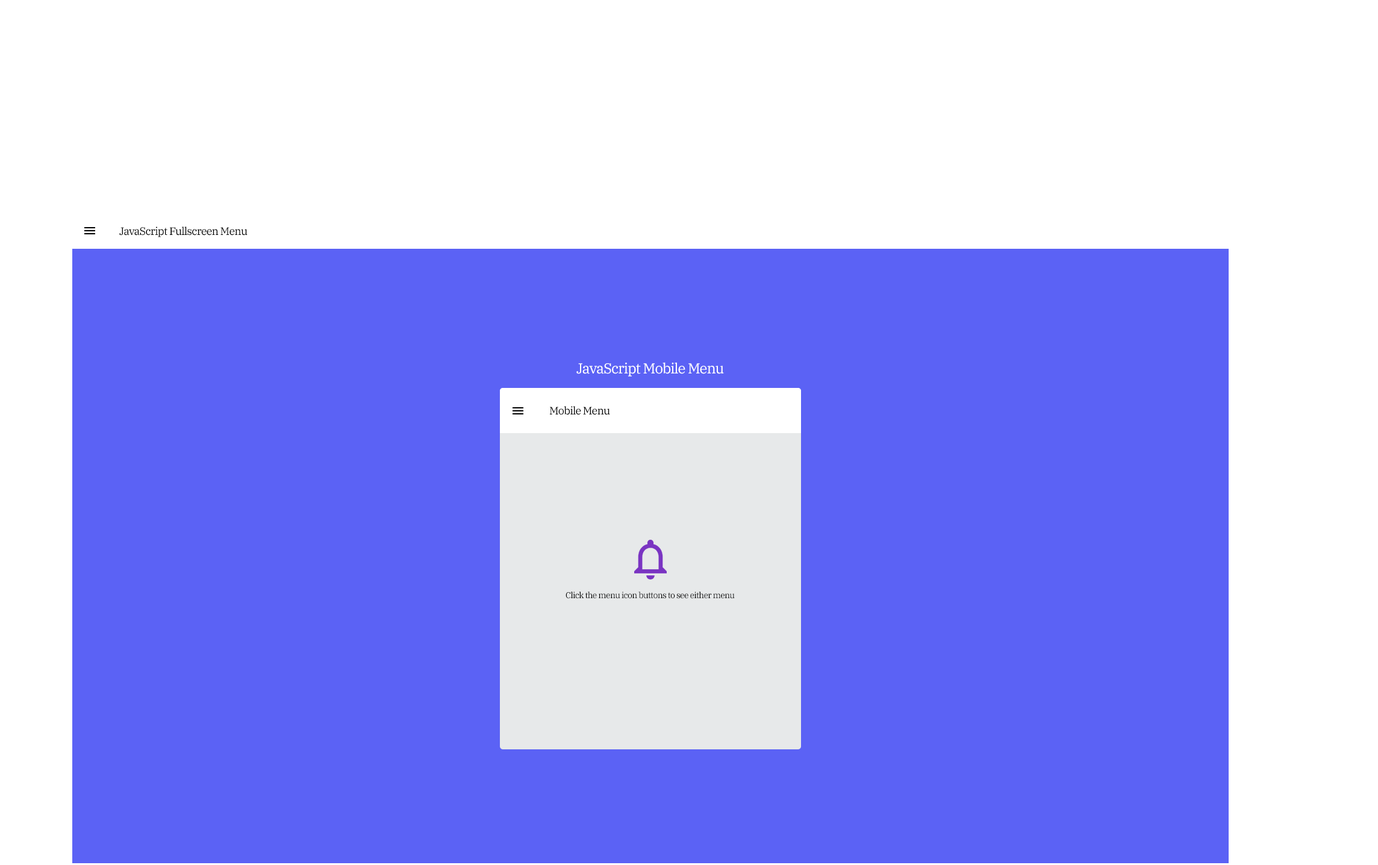
<style>
.page{position:relative;width:1378px;height:865px;background:#5b62f5}
.page>*{position:absolute;margin:0}
.t1{font:10.8px "IBMPlexSerif";letter-spacing:-0.046em;color:#000000}
.t2{font:14.5px "IBMPlexSerif";letter-spacing:-0.046em;color:#ffffff}
.t3{font:8.4px "IBMPlexSerif";letter-spacing:-0.046em;color:#000000}
</style>
<div class="page">
<p class="t1" style="left:119px;top:227px;width:129px;height:10px">JavaScript Fullscreen Menu</p>
<p class="t2" style="left:577px;top:362px;width:147px;height:15px">JavaScript Mobile Menu</p>
<p class="t1" style="left:550px;top:406px;width:60px;height:9px">Mobile Menu</p>
<p class="t3" style="left:566px;top:592px;width:169px;height:7px">Click the menu icon buttons to see either menu</p>
</div>
